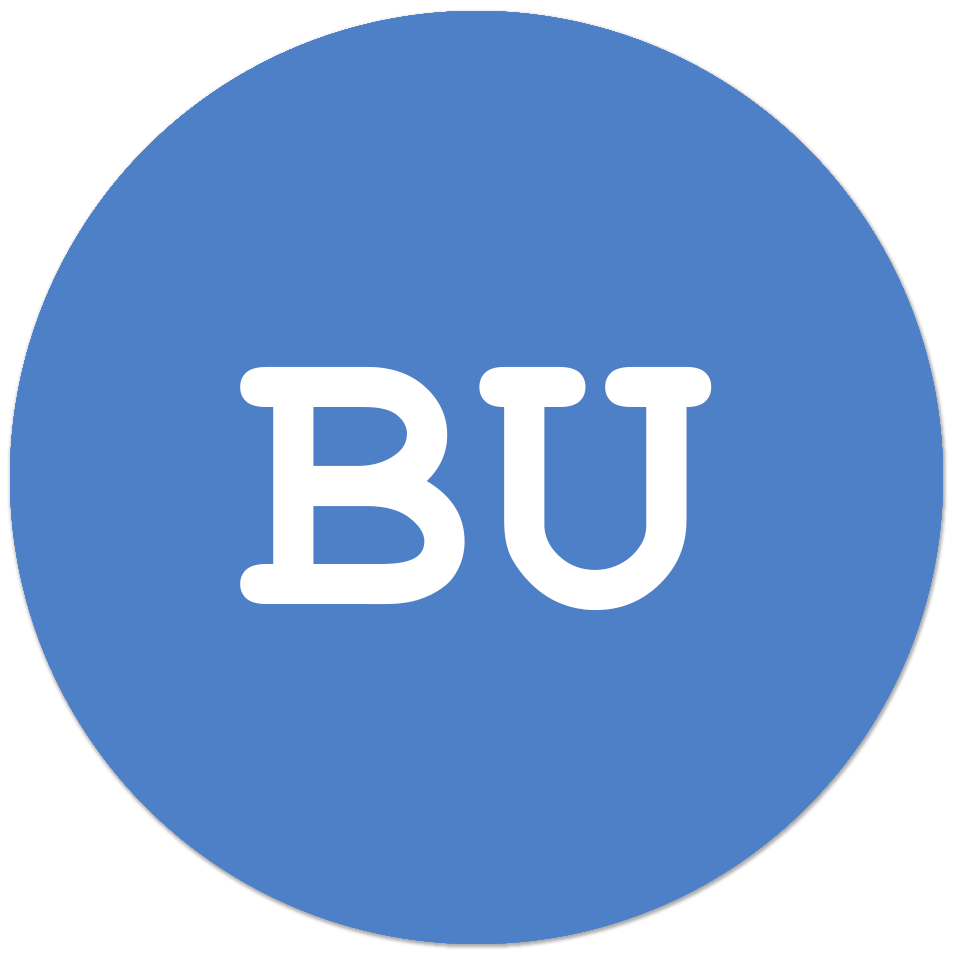
<style>
.page{position:relative;width:956px;height:956px;background:#4e80c7}
.page>*{position:absolute;margin:0}
.t1{font:400px "CourierNewPS-BoldMT";color:#ffffff}
</style>
<div class="page">
<p class="t1" style="left:240px;top:366px;width:472px;height:244px">BU</p>
</div>
